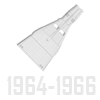
<style>
.page{position:relative;width:100px;height:100px;background:#ffffff}
.page>*{position:absolute;margin:0}
.t1{font:25.4px "AgencyFB-Bold";color:#e9e9e9}
</style>
<div class="page">
<p class="t1" style="left:7px;top:76px;width:89px;height:19px">1964-1966</p>
</div>
